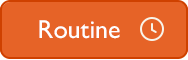
<style>
.page{position:relative;width:188px;height:60px;background:#e66327}
.page>*{position:absolute;margin:0}
.t1{font:26px "GillSans";color:#ffffff}
</style>
<div class="page">
<p class="t1" style="left:39px;top:20px;width:81px;height:19px">Routine</p>
</div>
